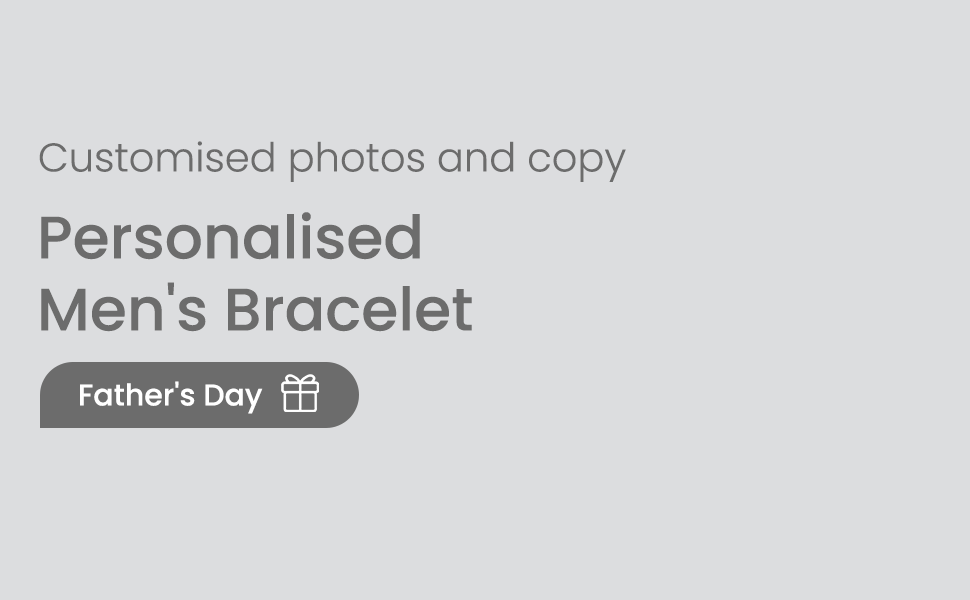
<style>
.page{position:relative;width:970px;height:600px;background:#dcdddf}
.page>*{position:absolute;margin:0}
.t1{font:40px "Poppins-Light";color:#6c6c6c}
.t2{font:60px "Poppins-Medium";color:#6c6c6c}
.t3{font:30px "Poppins-Medium";color:#ffffff}
</style>
<div class="page">
<p class="t1" style="left:39px;top:141px;width:587px;height:41px">Customised photos and copy</p>
<p class="t2" style="left:41px;top:212px;width:431px;height:120px">Personalised<br>Men's Bracelet</p>
<p class="t3" style="left:80px;top:381px;width:183px;height:33px">Father's Day</p>
</div>
